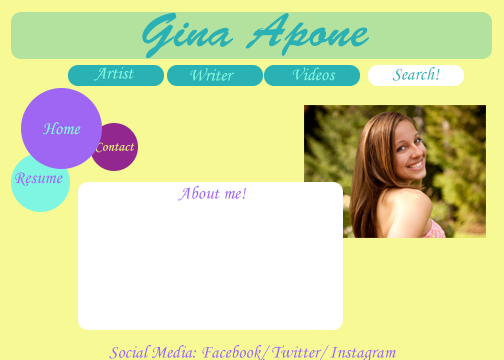
<style>
.page{position:relative;width:504px;height:360px;background:#f7fa94}
.page>*{position:absolute;margin:0}
.t1{font:48px "BrushScriptStd";color:#29b1b3}
.t2{font:18px "MonotypeCorsiva";color:#7ef6e2}
.t3{font:18px "MonotypeCorsiva";color:#29b1b3}
.t4{font:14px "MonotypeCorsiva";color:#eef275}
.t5{font:18px "MonotypeCorsiva";color:#9e66f2}
</style>
<div class="page">
<p class="t1" style="left:142px;top:12px;width:227px;height:47px">Gina Apone</p>
<p class="t2" style="left:94px;top:67px;width:40px;height:14px">Artist</p>
<p class="t2" style="left:190px;top:68px;width:44px;height:14px">Writer</p>
<p class="t2" style="left:292px;top:67px;width:44px;height:14px">Videos</p>
<p class="t3" style="left:392px;top:67px;width:48px;height:14px">Search!</p>
<p class="t2" style="left:43px;top:122px;width:38px;height:13px">Home</p>
<p class="t4" style="left:95px;top:142px;width:40px;height:11px">Contact</p>
<p class="t5" style="left:15px;top:172px;width:48px;height:14px">Resume</p>
<p class="t5" style="left:178px;top:186px;width:68px;height:15px">About me!</p>
<p class="t5" style="left:109px;top:345px;width:287px;height:17px">Social Media: Facebook/ Twitter/ Instagram</p>
</div>
